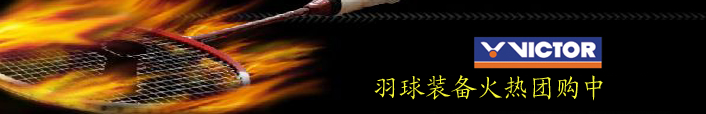
<style>
.page{position:relative;width:706px;height:114px;background:#000000}
.page>*{position:absolute;margin:0}
.t1{font:26px "KaiTi_GB2312";color:#f6f835}
</style>
<div class="page">
<p class="t1" style="left:374px;top:75px;width:229px;height:26px">羽球装备火热团购中</p>
</div>
